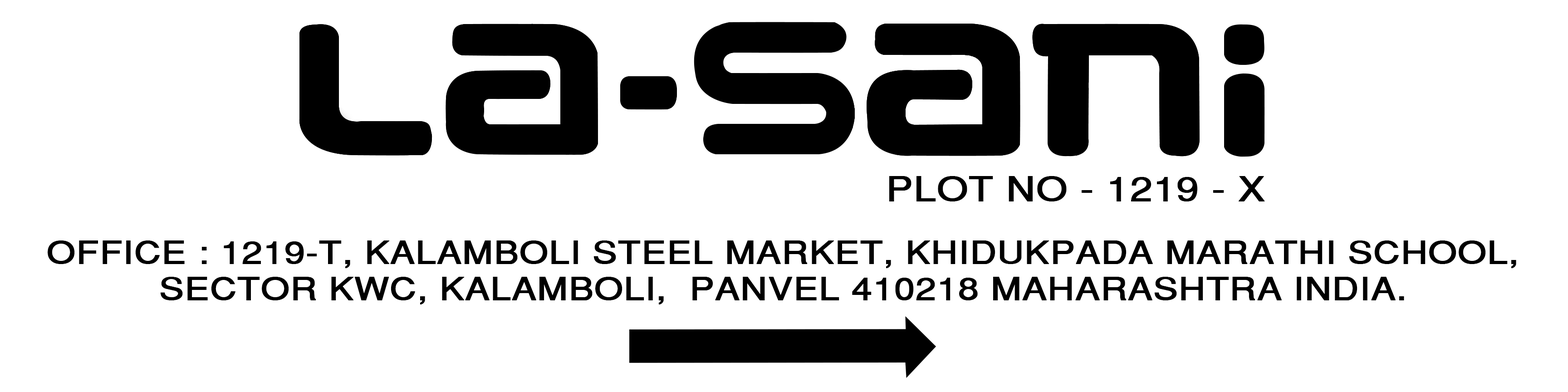
<style>
.page{position:relative;width:1568px;height:392px;background:#ffffff}
.page>*{position:absolute;margin:0}
.t1{font:33.5px "SansSerif";color:#000000;text-transform:uppercase;font-weight:bold;scale:1.19 1}
.t2{font:30.9px/36.3px "SansSerif";color:#000000;text-transform:uppercase;font-weight:bold;scale:1.19 1}
</style>
<div class="page">
<p class="t1" style="left:889px;top:176px;width:376px;height:25px">PLOT NO - 1219 - X</p>
<p class="t2" style="left:48px;top:240px;width:1468px;height:64px;text-align:center">Office : 1219-T, Kalamboli Steel Market, Khidukpada Marathi School,<br>Sector KWC, Kalamboli,  Panvel 410218 Maharashtra India.</p>
</div>
